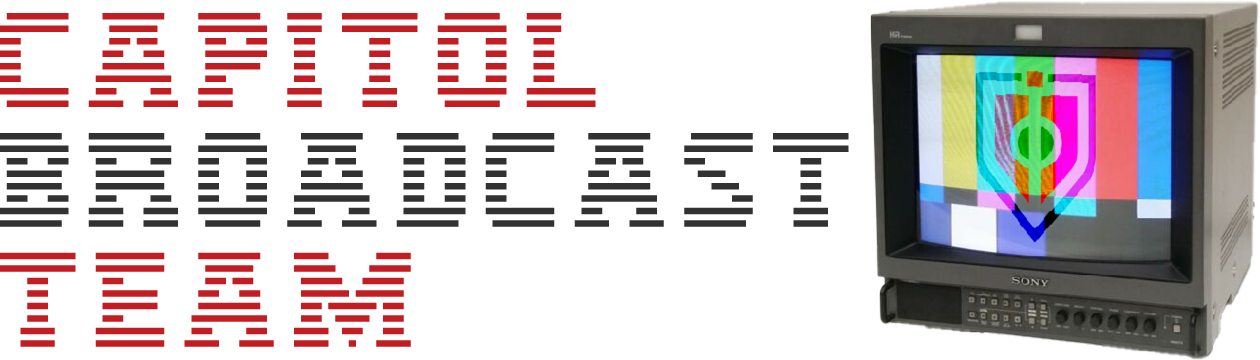
<style>
.page{position:relative;width:1260px;height:360px;background:#ffffff}
.page>*{position:absolute;margin:0}
.t1{font:99.9px "IBM-Logo";color:#323232;scale:1.1 1}
.t2{font:99.9px "IBM-Logo";color:#c31d24;scale:1.1 1}
</style>
<div class="page">
<p class="t1" style="left:0px;top:13px;width:849px;height:334px"><span class="t2">Capitol<br></span>Broadcast<br><span class="t2">Team</span></p>
</div>
